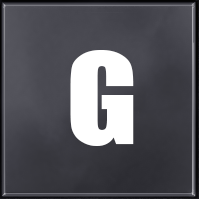
<style>
.page{position:relative;width:199px;height:199px}
.page>*{position:absolute;margin:0}
.t1{font:117px "Impact";color:#ffffff;scale:1.12 1}
</style>
<div class="page">
<p class="t1" style="left:70px;top:50px;width:64px;height:96px">G</p>
</div>
